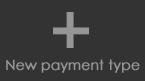
<style>
.page{position:relative;width:145px;height:81px;background:#333333}
.page>*{position:absolute;margin:0}
.t1{font:13.7px "CenturyGothic";color:#969696;font-weight:bold}
</style>
<div class="page">
<p class="t1" style="left:6px;top:59px;width:134px;height:14px">New payment type</p>
</div>
